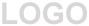
<style>
.page{position:relative;width:89px;height:26px;background:#ffffff}
.page>*{position:absolute;margin:0}
.t1{font:30px "Arial-BoldMT";color:#d8d6d6}
</style>
<div class="page">
<p class="t1" style="left:2px;top:2px;width:85px;height:23px">LOGO</p>
</div>
